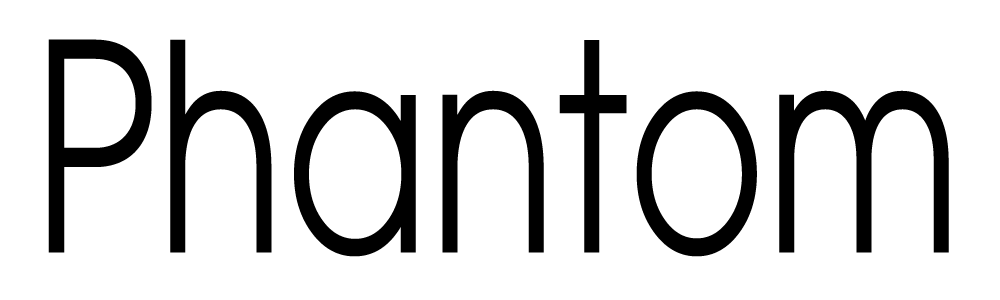
<style>
.page{position:relative;width:1000px;height:300px;background:#ffffff}
.page>*{position:absolute;margin:0}
.t1{font:287.5px "AvantGarde-Book";color:#000000;scale:0.73 1}
</style>
<div class="page">
<p class="t1" style="left:48px;top:39px;width:901px;height:218px">Phantom</p>
</div>
